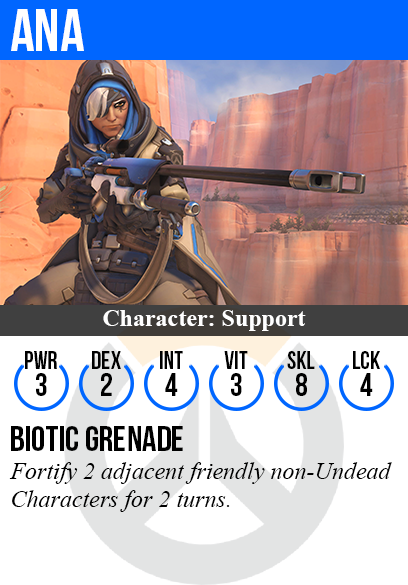
<style>
.page{position:relative;width:408px;height:585px;background:#ffffff}
.page>*{position:absolute;margin:0}
.t1{font:60px "BebasNeue";color:#ffffff}
.t2{font:24px "TimesNewRomanPS-BoldMT";color:#ffffff}
.t3{font:25px "BebasNeue";color:#000000}
.t4{font:32px "BebasNeue";color:#000000}
.t5{font:36px "BebasNeue";color:#000000}
.t6{font:24px "TimesNewRomanPS-ItalicMT";color:#000000}
</style>
<div class="page">
<p class="t1" style="left:11px;top:9px;width:73px;height:42px">ana</p>
<p class="t2" style="left:103px;top:310px;width:203px;height:21px">Character: Support</p>
<p class="t3" style="left:25px;top:351px;width:32px;height:18px">PWR</p>
<p class="t3" style="left:92px;top:351px;width:29px;height:18px">dex</p>
<p class="t3" style="left:160px;top:351px;width:23px;height:18px">int</p>
<p class="t3" style="left:224px;top:351px;width:24px;height:18px">vit</p>
<p class="t3" style="left:287px;top:351px;width:28px;height:18px">skl</p>
<p class="t3" style="left:353px;top:351px;width:27px;height:18px">lck</p>
<p class="t4" style="left:36px;top:373px;width:11px;height:23px">3</p>
<p class="t4" style="left:101px;top:373px;width:11px;height:23px">2</p>
<p class="t4" style="left:165px;top:373px;width:13px;height:23px">4</p>
<p class="t4" style="left:231px;top:373px;width:11px;height:23px">3</p>
<p class="t4" style="left:296px;top:373px;width:11px;height:23px">8</p>
<p class="t4" style="left:360px;top:373px;width:13px;height:23px">4</p>
<p class="t5" style="left:11px;top:426px;width:172px;height:25px">biotic grenade</p>
<p class="t6" style="left:9px;top:462px;width:383px;height:50px">Fortify 2 adjacent friendly non-Undead<br>Characters for 2 turns.</p>
</div>
